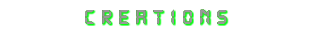
<style>
.page{position:relative;width:312px;height:34px;background:#ffffff}
.page>*{position:absolute;margin:0}
.t1{font:22px "DS-Digital-Bold";letter-spacing:0.27em;color:#999999;text-transform:uppercase}
</style>
<div class="page">
<p class="t1" style="left:85px;top:9px;width:142px;height:16px">Creations</p>
</div>
